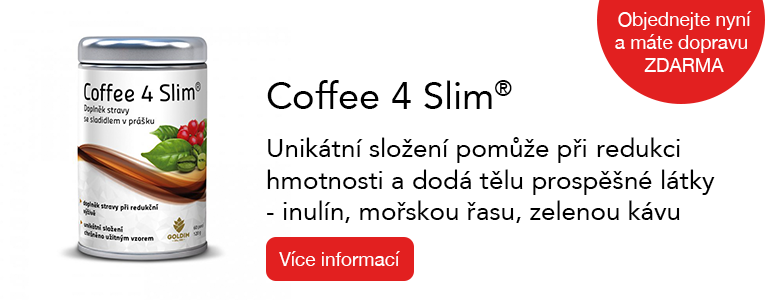
<style>
.page{position:relative;width:781px;height:300px;background:#ffffff}
.page>*{position:absolute;margin:0}
.t1{font:19px "HelveticaNeue";color:#ffffff}
.t2{font:38px "Avenir-Roman";color:#000000}
.t3{font:26px "Avenir-Roman";color:#000000}
</style>
<div class="page">
<p class="t1" style="left:615px;top:11px;width:137px;height:61px;text-align:center">Objednejte nyní<br>a máte dopravu <br>ZDARMA</p>
<p class="t2" style="left:267px;top:80px;width:245px;height:29px">Coffee 4 Slim®</p>
<p class="t3" style="left:267px;top:137px;width:448px;height:86px">Unikátní složení pomůže při redukci<br>hmotnosti a dodá tělu prospěšné látky<br>- inulín, mořskou řasu, zelenou kávu</p>
<p class="t1" style="left:279px;top:251px;width:121px;height:15px">Více informací</p>
</div>
